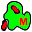
<style>
.page{position:relative;width:32px;height:32px;background:#ffffff}
.page>*{position:absolute;margin:0}
.t1{font:10px "Arial-BoldMT";color:#ff0000}
</style>
<div class="page">
<p class="t1" style="left:19px;top:17px;width:8px;height:9px">M</p>
</div>
